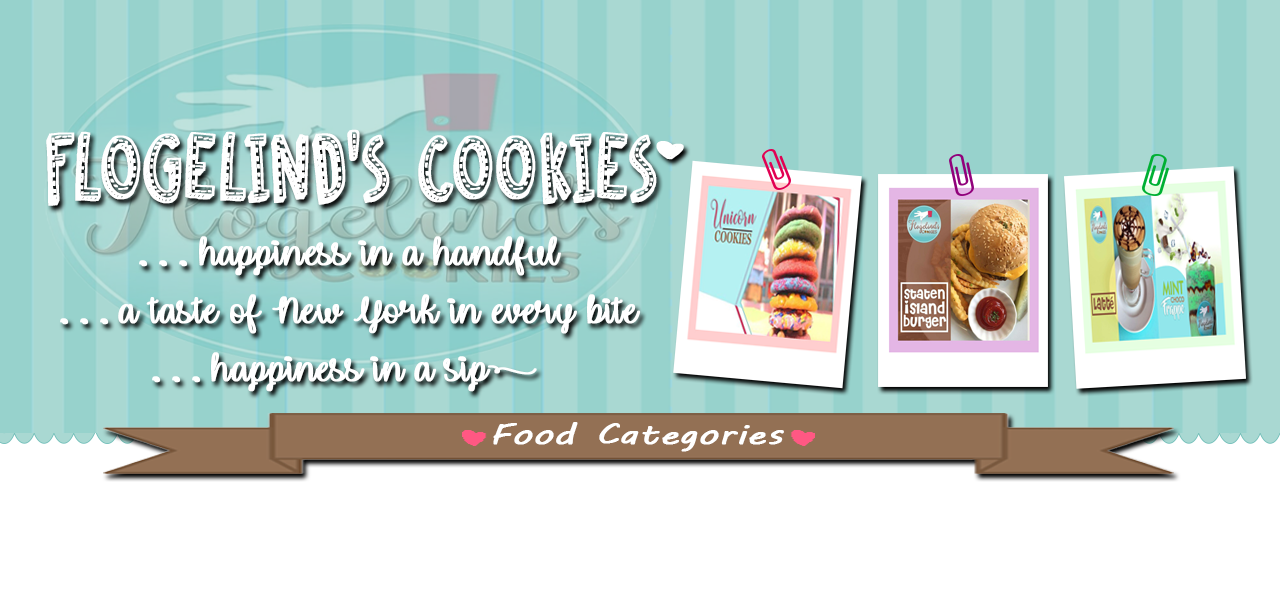
<style>
.page{position:relative;width:1280px;height:600px;background:#ffffff}
.page>*{position:absolute;margin:0}
.t1{font:84.5px "DKCosmoStitch";color:#ffffff;font-weight:bold;scale:0.87 1}
.t2{font:38.1px "UnicornCalligraphy";color:#ffffff;font-weight:bold;scale:1.06 1}
.t3{font:28.6px "MVBoli";color:#ffffff;font-weight:bold;scale:1.33 1}
</style>
<div class="page">
<p class="t1" style="left:46px;top:129px;width:611px;height:77px">FLOGELIND’S COOKIES</p>
<p class="t2" style="left:60px;top:236px;width:581px;height:156px;text-align:center">. . . happiness in a handful<br>. . . a taste of New York in every bite<br>. . . happiness in a sip[</p>
<p class="t3" style="left:493px;top:422px;width:291px;height:30px">Food Categories</p>
</div>
